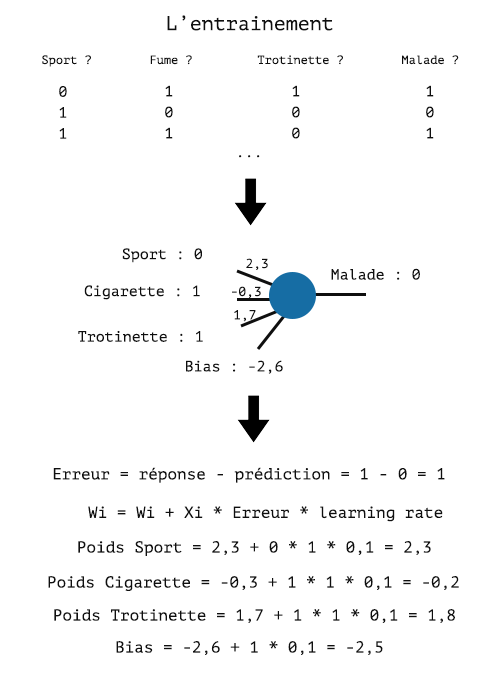
<style>
.page{position:relative;width:500px;height:700px;background:#ffffff}
.page>*{position:absolute;margin:0}
.t1{font:20px "PTMono-Regular";color:#0f0f0f}
.t2{font:12px "PTMono-Regular";color:#0f0f0f}
.t3{font:15px "PTMono-Regular";color:#0f0f0f}
.t4{font:13px "PTMono-Regular";color:#0f0f0f}
.t5{font:16px "PTMono-Regular";color:#0f0f0f}
</style>
<div class="page">
<p class="t1" style="left:167px;top:15px;width:166px;height:16px">L’entrainement</p>
<p class="t2" style="left:42px;top:55px;width:417px;height:12px">Sport ?  Fume ?  Trotinette ?  Malade ?</p>
<p class="t3" style="left:59px;top:86px;width:8px;height:11px">0</p>
<p class="t3" style="left:165px;top:85px;width:8px;height:12px">1</p>
<p class="t3" style="left:292px;top:85px;width:8px;height:12px">1</p>
<p class="t3" style="left:426px;top:85px;width:8px;height:12px">1</p>
<p class="t3" style="left:59px;top:107px;width:8px;height:11px">1</p>
<p class="t3" style="left:165px;top:106px;width:8px;height:12px">0</p>
<p class="t3" style="left:292px;top:106px;width:8px;height:12px">0</p>
<p class="t3" style="left:426px;top:106px;width:8px;height:12px">0</p>
<p class="t3" style="left:59px;top:128px;width:8px;height:11px">1</p>
<p class="t3" style="left:165px;top:127px;width:8px;height:12px">1</p>
<p class="t3" style="left:292px;top:127px;width:8px;height:12px">0</p>
<p class="t3" style="left:426px;top:127px;width:8px;height:12px">1</p>
<p class="t3" style="left:239px;top:155px;width:21px;height:3px">...</p>
<p class="t3" style="left:122px;top:248px;width:80px;height:15px">Sport : 0</p>
<p class="t4" style="left:246px;top:258px;width:22px;height:12px">2,3</p>
<p class="t3" style="left:331px;top:268px;width:89px;height:12px">Malade : 0</p>
<p class="t3" style="left:84px;top:285px;width:116px;height:15px">Cigarette : 1</p>
<p class="t4" style="left:232px;top:286px;width:29px;height:12px">-0,3</p>
<p class="t4" style="left:234px;top:310px;width:22px;height:12px">1,7</p>
<p class="t3" style="left:78px;top:330px;width:125px;height:12px">Trotinette : 1</p>
<p class="t3" style="left:186px;top:360px;width:97px;height:14px">Bias : -2,6</p>
<p class="t5" style="left:53px;top:467px;width:392px;height:16px">Erreur = réponse - prédiction = 1 - 0 = 1</p>
<p class="t5" style="left:88px;top:506px;width:355px;height:16px">Wi = Wi + Xi * Erreur * learning rate</p>
<p class="t5" style="left:78px;top:541px;width:353px;height:15px">Poids Sport = 2,3 + 0 * 1 * 0,1 = 2,3</p>
<p class="t5" style="left:48px;top:576px;width:411px;height:15px">Poids Cigarette = -0,3 + 1 * 1 * 0,1 = -0,2</p>
<p class="t5" style="left:54px;top:609px;width:401px;height:14px">Poids Trotinette = 1,7 + 1 * 1 * 0,1 = 1,8</p>
<p class="t5" style="left:116px;top:641px;width:267px;height:14px">Bias = -2,6 + 1 * 0,1 = -2,5</p>
</div>
